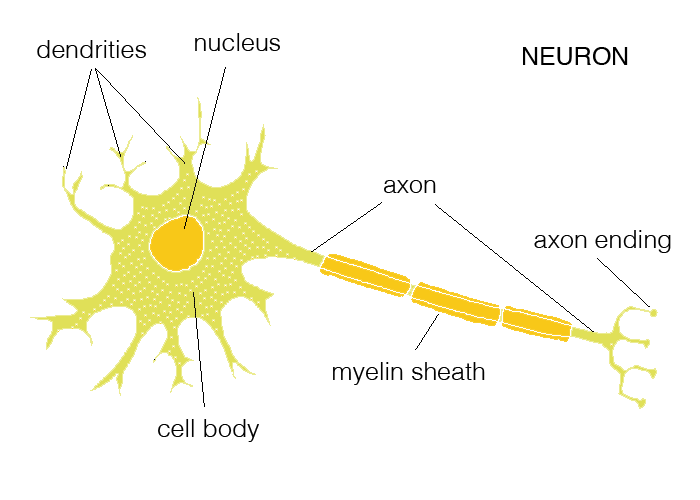
<style>
.page{position:relative;width:700px;height:500px;background:#ffffff}
.page>*{position:absolute;margin:0}
.t1{font:25px "Helvetica-Light";color:#000000}
.t2{font:25px "Helvetica";color:#000000}
</style>
<div class="page">
<p class="t1" style="left:37px;top:40px;width:109px;height:18px">dendrities</p>
<p class="t1" style="left:195px;top:33px;width:85px;height:18px">nucleus</p>
<p class="t2" style="left:523px;top:47px;width:105px;height:18px">NEURON</p>
<p class="t1" style="left:384px;top:180px;width:52px;height:13px">axon</p>
<p class="t1" style="left:534px;top:230px;width:137px;height:23px">axon ending</p>
<p class="t1" style="left:333px;top:362px;width:152px;height:23px">myelin sheath</p>
<p class="t1" style="left:158px;top:419px;width:101px;height:23px">cell body</p>
</div>
